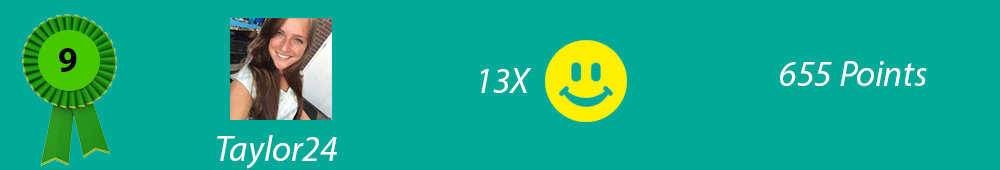
<style>
.page{position:relative;width:1000px;height:170px;background:#00a998}
.page>*{position:absolute;margin:0}
.t1{font:36px "MyriadPro-Bold";color:#000000}
.t2{font:36px "MyriadPro-It";color:#ffffff}
</style>
<div class="page">
<p class="t1" style="left:59px;top:48px;width:18px;height:24px">9</p>
<p class="t2" style="left:780px;top:61px;width:147px;height:25px">655 Points</p>
<p class="t2" style="left:481px;top:68px;width:51px;height:25px">13X</p>
<p class="t2" style="left:217px;top:135px;width:120px;height:34px">Taylor24</p>
</div>
